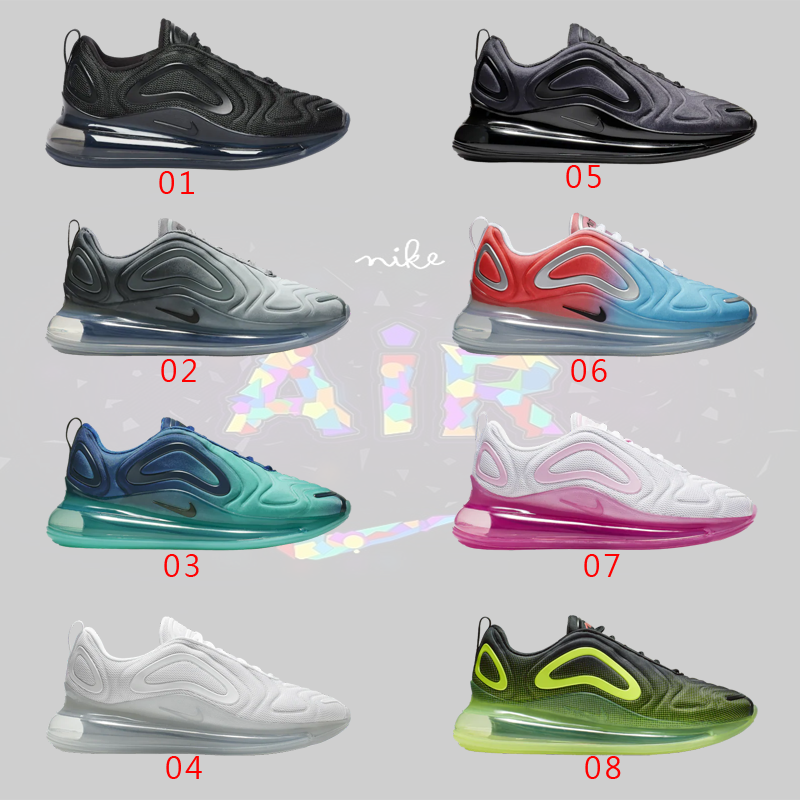
<style>
.page{position:relative;width:800px;height:800px;background:#cfcfcf}
.page>*{position:absolute;margin:0}
.t1{font:30px "MicrosoftJhengHeiRegular";letter-spacing:0.1em;color:#ff0000}
</style>
<div class="page">
<p class="t1" style="left:159px;top:171px;width:35px;height:23px">01</p>
<p class="t1" style="left:566px;top:165px;width:35px;height:23px">05</p>
<p class="t1" style="left:161px;top:359px;width:35px;height:23px">02</p>
<p class="t1" style="left:571px;top:359px;width:36px;height:23px">06</p>
<p class="t1" style="left:164px;top:554px;width:35px;height:23px">03</p>
<p class="t1" style="left:584px;top:554px;width:36px;height:23px">07</p>
<p class="t1" style="left:166px;top:756px;width:36px;height:23px">04</p>
<p class="t1" style="left:585px;top:756px;width:36px;height:23px">08</p>
</div>
